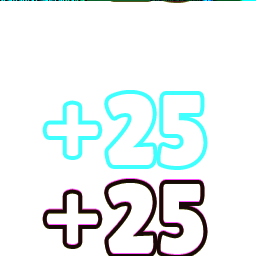
<style>
.page{position:relative;width:256px;height:256px;background:#ffffff}
.page>*{position:absolute;margin:0}
.t1{font:100px "LilitaOne";color:#ffffff}
</style>
<div class="page">
<p class="t1" style="left:46px;top:93px;width:158px;height:72px">+25</p>
</div>
